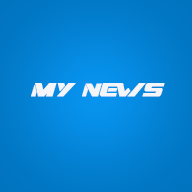
<style>
.page{position:relative;width:192px;height:192px}
.page>*{position:absolute;margin:0}
.t1{font:18px "DreamMMA";letter-spacing:0.01em;color:#f4f5f8;text-transform:uppercase;font-weight:bold}
</style>
<div class="page">
<p class="t1" style="left:31px;top:83px;width:134px;height:14px">my news</p>
</div>
